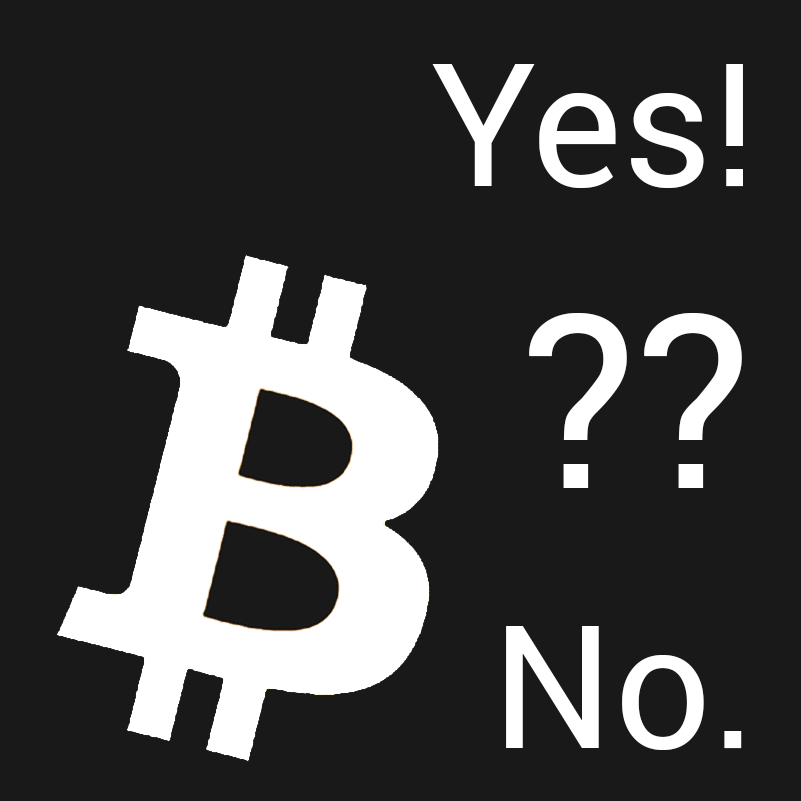
<style>
.page{position:relative;width:801px;height:801px;background:#191919}
.page>*{position:absolute;margin:0}
.t1{font:172px "Roboto-Regular";color:#ffffff}
.t2{font:242.4px "Roboto-Regular";color:#ffffff}
</style>
<div class="page">
<p class="t1" style="left:432px;top:64px;width:311px;height:124px">Yes!</p>
<p class="t2" style="left:529px;top:313px;width:213px;height:175px">??</p>
<p class="t1" style="left:506px;top:626px;width:236px;height:124px">No.</p>
</div>
